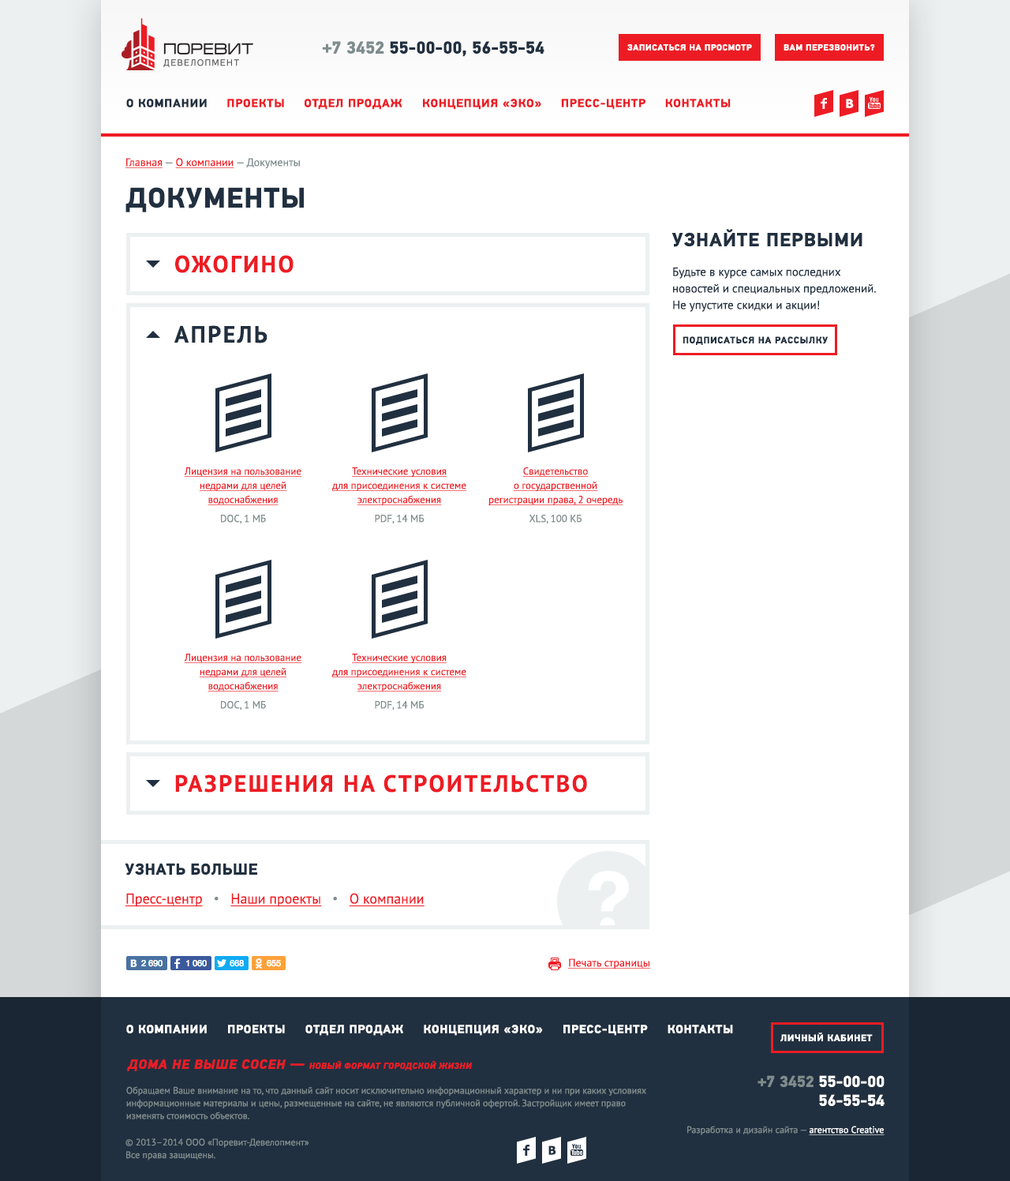
<style>
.page{position:relative;width:1010px;height:1181px;background:#ffffff}
.page>*{position:absolute;margin:0}
.t1{font:17.4px "PFDinTextPro-Bold";color:#213040;text-transform:uppercase}
.t2{font:17.4px "PFDinTextPro-Bold";color:#7f8c8d;text-transform:uppercase}
.t3{font:8.7px "PFDinTextPro-Bold";letter-spacing:0.05em;color:#ffffff;text-transform:uppercase}
.t4{font:11.8px "PFDinTextPro-Bold";letter-spacing:0.05em;color:#ed1c24;text-transform:uppercase}
.t5{font:11.8px "PFDinTextPro-Bold";letter-spacing:0.05em;color:#213040;text-transform:uppercase}
.t6{font:11.8px "PFDinTextPro-Bold";color:#213040;text-transform:uppercase}
.t7{font:11.8px "PFDinTextPro-Bold";color:#ed1c24;text-transform:uppercase}
.t8{font:11.8px "Tahoma-Bold";letter-spacing:0.05em;color:#ffffff;text-transform:uppercase}
.t9{font:11px "PTSans-Regular";color:#7f8c8d}
.t10{font:11px "PTSans-Regular";color:#ed1c24;text-decoration:underline}
.t11{font:28.4px "PFDinTextPro-Bold";letter-spacing:0.03em;color:#213040;text-transform:uppercase}
.t12{font:18.9px "PFDinTextPro-Bold";letter-spacing:0.04em;color:#213040;text-transform:uppercase}
.t13{font:23.7px "PTSans-Bold";letter-spacing:0.08em;color:#ed1c24;text-transform:uppercase}
.t14{font:11.8px/16.6px "PTSans-Regular";color:#213040}
.t15{font:23.7px "PTSans-Bold";letter-spacing:0.08em;color:#213040;text-transform:uppercase}
.t16{font:9.5px "PFDinTextPro-Bold";letter-spacing:0.05em;color:#213040;text-transform:uppercase}
.t17{font:10.3px/14.2px "PTSans-Regular";color:#ed1c24;text-decoration:underline}
.t18{font:10.3px/18.9px "PTSans-Regular";color:#7f8c8d}
.t19{font:15.8px "PFDinTextPro-Bold";letter-spacing:0.03em;color:#213040;text-transform:uppercase}
.t20{font:14.2px "PTSans-Regular";color:#ed1c24;text-decoration:underline}
.t21{font:14.2px "ArialMT";color:#7f8c8d}
.t22{font:11.8px "PFDinTextPro-Bold";letter-spacing:0.05em;color:#ffffff;text-transform:uppercase}
.t23{font:9.5px "PFDinTextPro-Bold";letter-spacing:0.05em;color:#ffffff;text-transform:uppercase}
.t24{font:8.7px "PFDinTextPro-BoldItalic";letter-spacing:0.05em;color:#ed1c24;text-transform:uppercase}
.t25{font:13.4px "PFDinTextPro-BoldItalic";letter-spacing:0.05em;color:#ed1c24;text-transform:uppercase}
.t26{font:9.5px/12.6px "PTSans-Regular";color:#7f8c8d}
.t27{font:15.8px/18.9px "PFDinTextPro-Bold";color:#ffffff;text-transform:uppercase}
.t28{font:15.8px/18.9px "PFDinTextPro-Bold";color:#7f8c8d;text-transform:uppercase}
.t29{font:9.5px "PTSans-Regular";color:#7f8c8d}
.t30{font:9.5px "PTSans-Regular";color:#ffffff;text-decoration:underline}
.t31{font:11.8px "Tahoma-Bold";letter-spacing:0.05em;color:#213040;text-transform:uppercase}
</style>
<div class="page">
<p class="t1" style="left:322px;top:41px;width:222px;height:16px"><span class="t2">+7 3452 </span>55-00-00, 56-55-54</p>
<p class="t3" style="left:627px;top:44px;width:125px;height:7px">записаться на просмотр</p>
<p class="t3" style="left:784px;top:44px;width:91px;height:7px">вам перезвонить?</p>
<p class="t4" style="left:126px;top:99px;width:605px;height:11px"><span class="t5">О компани</span><span class="t6">и</span>     проект<span class="t7">ы</span>     отдел продаж     концепция «эко<span class="t7">»</span>     пресс-цент<span class="t7">р</span>     контакт<span class="t7">ы</span></p>
<p class="t8" style="left:846px;top:99px;width:8px;height:9px">В</p>
<p class="t9" style="left:125px;top:158px;width:175px;height:11px"><span class="t10">Главная </span>— <span class="t10">О компании</span> — Документы</p>
<p class="t11" style="left:125px;top:187px;width:179px;height:25px">документы</p>
<p class="t12" style="left:672px;top:229px;width:191px;height:18px">Узнайте первыми</p>
<p class="t13" style="left:175px;top:255px;width:119px;height:18px">ожогино</p>
<p class="t14" style="left:673px;top:267px;width:203px;height:45px">Будьте в курсе самых последних новостей и специальных предложений. Не упустите скидки и акции!</p>
<p class="t15" style="left:174px;top:325px;width:94px;height:18px">апрель</p>
<p class="t16" style="left:683px;top:336px;width:145px;height:9px">подписаться на рассылку</p>
<p class="t17" style="left:184px;top:467px;width:118px;height:57px;text-align:center">Лицензия на пользование недрами для целей водоснабжения<br><span class="t18">DOC, 1 МБ</span></p>
<p class="t17" style="left:332px;top:467px;width:134px;height:57px;text-align:center">Технические условия<br>для присоединения к системе электроснабжения<br><span class="t18">PDF, 14 МБ</span></p>
<p class="t17" style="left:488px;top:467px;width:135px;height:57px;text-align:center">Свидетельство<br>о государственной регистрации права, 2 очередь<br><span class="t18">XLS, 100 КБ</span></p>
<p class="t17" style="left:184px;top:653px;width:118px;height:57px;text-align:center">Лицензия на пользование недрами для целей водоснабжения<br><span class="t18">DOC, 1 МБ</span></p>
<p class="t17" style="left:332px;top:653px;width:134px;height:57px;text-align:center">Технические условия<br>для присоединения к системе электроснабжения<br><span class="t18">PDF, 14 МБ</span></p>
<p class="t13" style="left:175px;top:774px;width:412px;height:18px">разрешения на строительство</p>
<p class="t19" style="left:125px;top:863px;width:132px;height:12px">узнать больше</p>
<p class="t20" style="left:125px;top:893px;width:300px;height:14px">Пресс-центр   <span class="t21">•   </span>Наши проекты   <span class="t21">•   </span>О компании</p>
<p class="t10" style="left:568px;top:958px;width:83px;height:11px">Печать страницы</p>
<p class="t22" style="left:126px;top:1024px;width:607px;height:11px">О компании     проекты     отдел продаж     концепция «эко»     пресс-центр     контакты</p>
<p class="t23" style="left:780px;top:1032px;width:93px;height:10px">личный кабинет</p>
<p class="t24" style="left:127px;top:1058px;width:346px;height:13px"><span class="t25">дома не выше сосен — </span>новый формат городской жизни</p>
<p class="t26" style="left:126px;top:1086px;width:520px;height:33px">Обращаем Ваше внимание на то, что данный сайт носит исключительно информационный характер и ни при каких условиях информационные материалы и цены, размещенные на сайте, не являются публичной офертой. Застройщик имеет право изменять стоимость объектов.</p>
<p class="t27" style="left:758px;top:1075px;width:127px;height:31px;text-align:right"><span class="t28">+7 3452 </span>55-00-00<br>56-55-54</p>
<p class="t29" style="left:687px;top:1125px;width:198px;height:10px">Разработка и дизайн сайта — <span class="t30">агентство Creative</span></p>
<p class="t26" style="left:125px;top:1138px;width:184px;height:22px">© 2013–2014 ООО «Поревит-Девелопмент» <br>Все права защищены.</p>
<p class="t31" style="left:548px;top:1145px;width:8px;height:9px">В</p>
</div>
